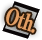
<style>
.page{position:relative;width:42px;height:40px;background:#ffffff}
.page>*{position:absolute;margin:0}
.t1{font:22px "RyuminPro-ExBold";letter-spacing:-0.08em;color:#e29d63;font-weight:bold;scale:0.8 1}
</style>
<div class="page">
<p class="t1" style="left:6px;top:8px;width:29px;height:25px;rotate:19deg">Oth.</p>
</div>
